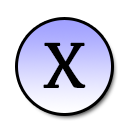
<style>
.page{position:relative;width:128px;height:128px;background:#ffffff}
.page>*{position:absolute;margin:0}
.t1{font:68.1px "Kefa-Regular";color:#000000}
</style>
<div class="page">
<p class="t1" style="left:43px;top:42px;width:43px;height:46px">X</p>
</div>
